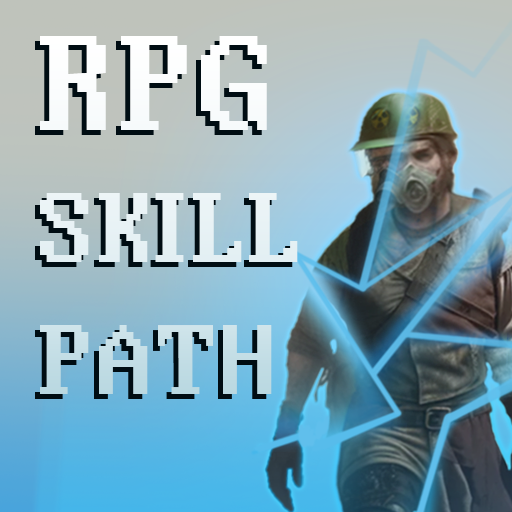
<style>
.page{position:relative;width:512px;height:512px}
.page>*{position:absolute;margin:0}
.t1{font:150px "MorePerfectDOSVGA";letter-spacing:-0.025em}
.t2{font:110px "MorePerfectDOSVGA";letter-spacing:-0.025em}
.t3{font:110px "MorePerfectDOSVGA";letter-spacing:-0.175em}
.t4{font:110px "MorePerfectDOSVGA";letter-spacing:-0.1em}
.t5{font:110px "MorePerfectDOSVGA";letter-spacing:-0.05em}
.t6{font:110px "MorePerfectDOSVGA";letter-spacing:0.025em}
</style>
<div class="page">
<p class="t1" style="left:40px;top:36px;width:258px;height:358px">RPG<br><span class="t2">S</span><span class="t3">K</span><span class="t4">I</span><span class="t5">LL</span><span class="t2"> PA</span><span class="t6">TH</span></p>
</div>
